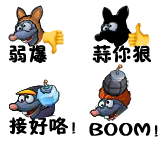
<style>
.page{position:relative;width:163px;height:157px;background:#ffffff}
.page>*{position:absolute;margin:0}
.t1{font:19.6px "FZSEJW--GB1-0";color:#000000;font-weight:bold}
</style>
<div class="page">
<p class="t1" style="left:9px;top:45px;width:38px;height:18px">弱爆</p>
<p class="t1" style="left:92px;top:45px;width:59px;height:18px">蒜你狠</p>
<p class="t1" style="left:9px;top:117px;width:67px;height:18px">接好咯！</p>
<p class="t1" style="left:89px;top:123px;width:69px;height:14px">BOOM！</p>
</div>
